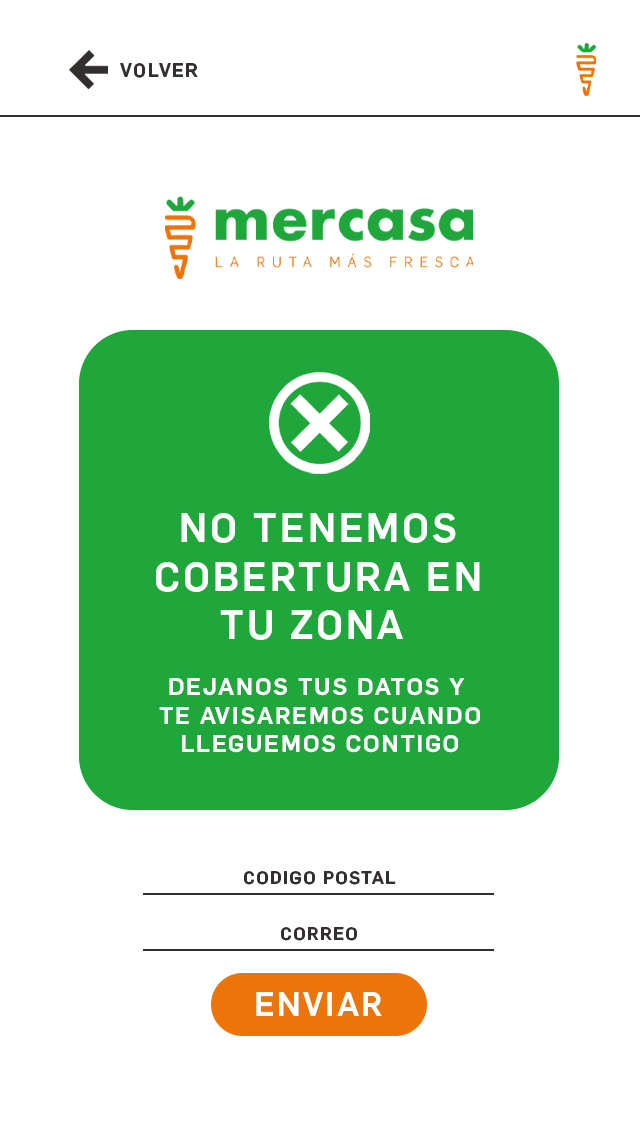
<style>
.page{position:relative;width:640px;height:1136px;background:#ffffff}
.page>*{position:absolute;margin:0}
.t1{font:19.1px "Flama-Medium";letter-spacing:0.075em;color:#332f2e}
.t2{font:40.2px "Flama-Medium";letter-spacing:0.075em;color:#ffffff}
.t3{font:24px "Flama-Medium";letter-spacing:0.075em;color:#ffffff}
.t4{font:18px "Flama-Medium";letter-spacing:0.075em;color:#332f2e}
</style>
<div class="page">
<p class="t1" style="left:120px;top:63px;width:78px;height:15px">VOLVER</p>
<p class="t2" style="left:156px;top:513px;width:324px;height:127px;text-align:center">NO TENEMOS<br>COBERTURA EN<br>TU ZONA</p>
<p class="t3" style="left:159px;top:678px;width:321px;height:75px;text-align:center">DEJANOS TUS DATOS Y <br>TE AVISAREMOS CUANDO<br>LLEGUEMOS CONTIGO</p>
<p class="t4" style="left:244px;top:871px;width:152px;height:14px">CODIGO POSTAL</p>
<p class="t4" style="left:281px;top:927px;width:76px;height:14px">CORREO</p>
</div>
